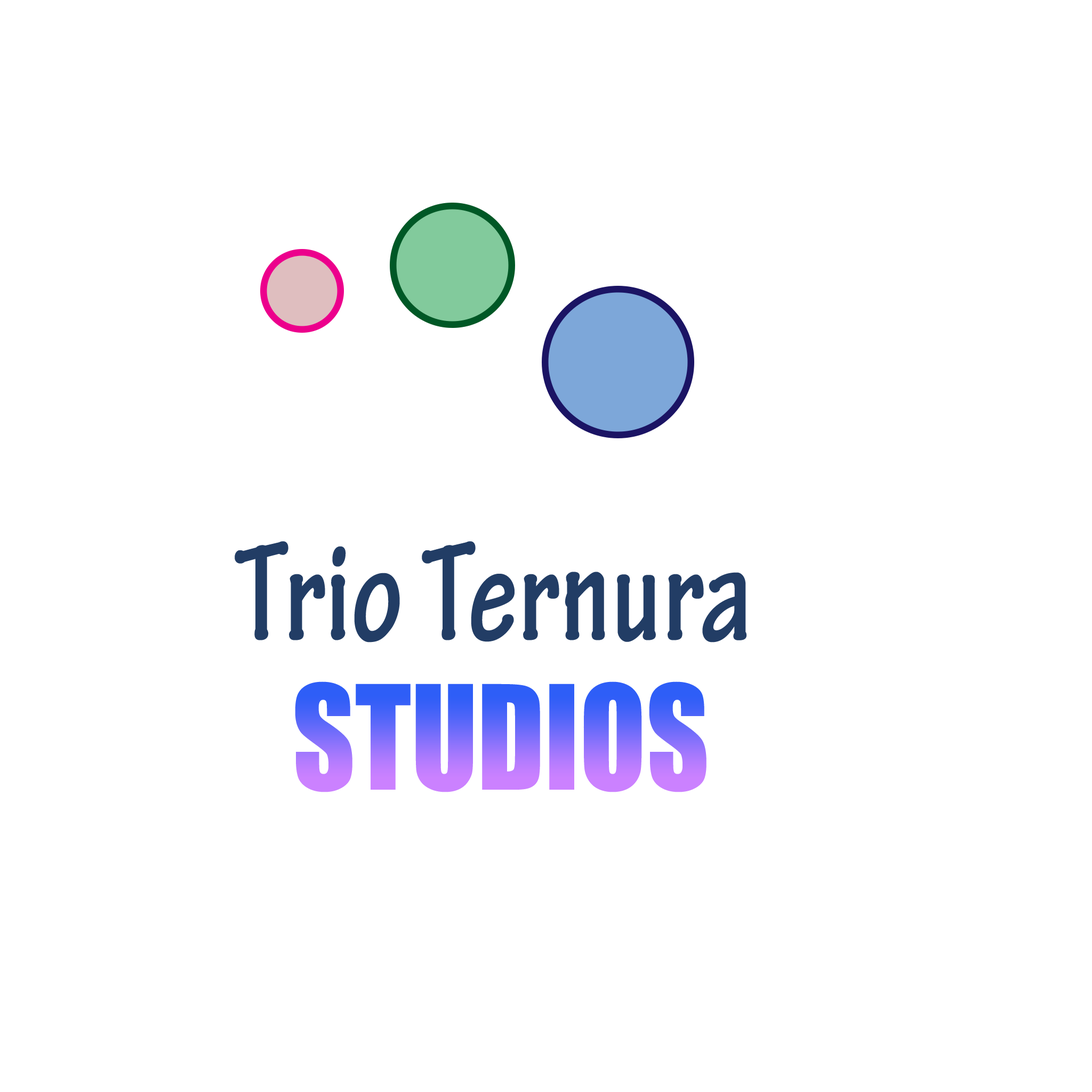
<style>
.page{position:relative;width:1092px;height:1092px;background:#ffffff}
.page>*{position:absolute;margin:0}
.t1{font:148.4px "TektonPro-BoldCond";color:#223d65;scale:0.91 1}
.t2{font:133.6px "Impact";scale:0.91 1}
</style>
<div class="page">
<p class="t1" style="left:235px;top:541px;width:512px;height:102px">Trio Ternura</p>
<p class="t2" style="left:295px;top:681px;width:411px;height:111px">STUDIOS</p>
</div>
